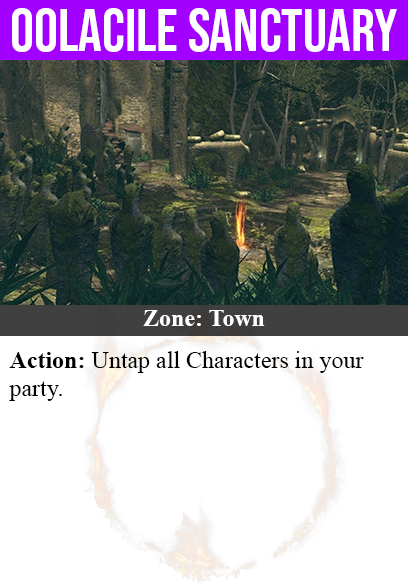
<style>
.page{position:relative;width:408px;height:585px;background:#ffffff}
.page>*{position:absolute;margin:0}
.t1{font:60px "BebasNeue-Regular";color:#ffffff}
.t2{font:24px "TimesNewRomanPS-BoldMT";color:#ffffff}
.t3{font:24px "TimesNewRomanPSMT";color:#000000}
.t4{font:24px "TimesNewRomanPS-BoldMT";color:#000000}
</style>
<div class="page">
<p class="t1" style="left:12px;top:8px;width:385px;height:44px">Oolacile Sanctuary</p>
<p class="t2" style="left:143px;top:310px;width:122px;height:16px">Zone: Town</p>
<p class="t3" style="left:9px;top:351px;width:355px;height:50px"><span class="t4">Action:</span> Untap all Characters in your<br>party.</p>
</div>
